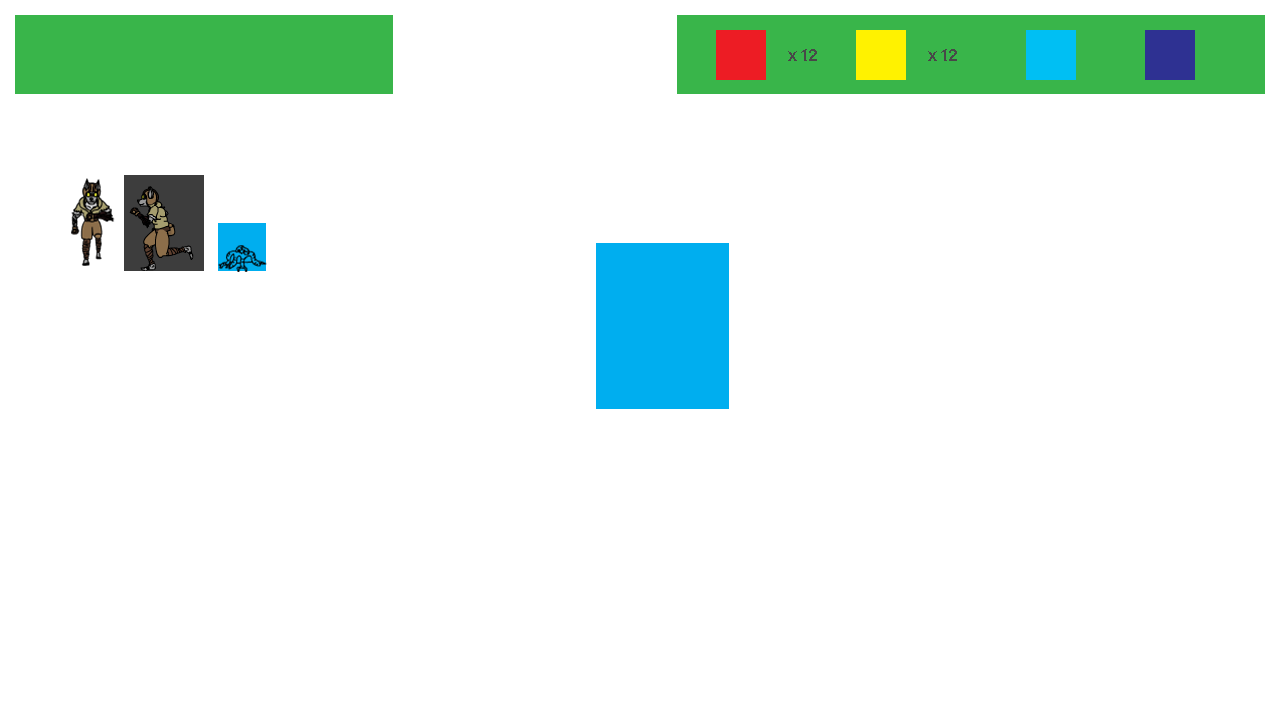
<style>
.page{position:relative;width:1280px;height:720px;background:#ffffff}
.page>*{position:absolute;margin:0}
.t1{font:18px "AcuminConcept-Bold";color:#484848}
</style>
<div class="page">
<p class="t1" style="left:788px;top:49px;width:29px;height:12px">x 12</p>
<p class="t1" style="left:928px;top:49px;width:29px;height:12px">x 12</p>
</div>
